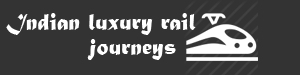
<style>
.page{position:relative;width:300px;height:75px;background:#333333}
.page>*{position:absolute;margin:0}
.t1{font:24px "MaturaMTScriptCapitals";color:#ffffff}
</style>
<div class="page">
<p class="t1" style="left:6px;top:13px;width:190px;height:22px">Indian luxury rail</p>
<p class="t1" style="left:87px;top:39px;width:89px;height:21px">journeys</p>
</div>
